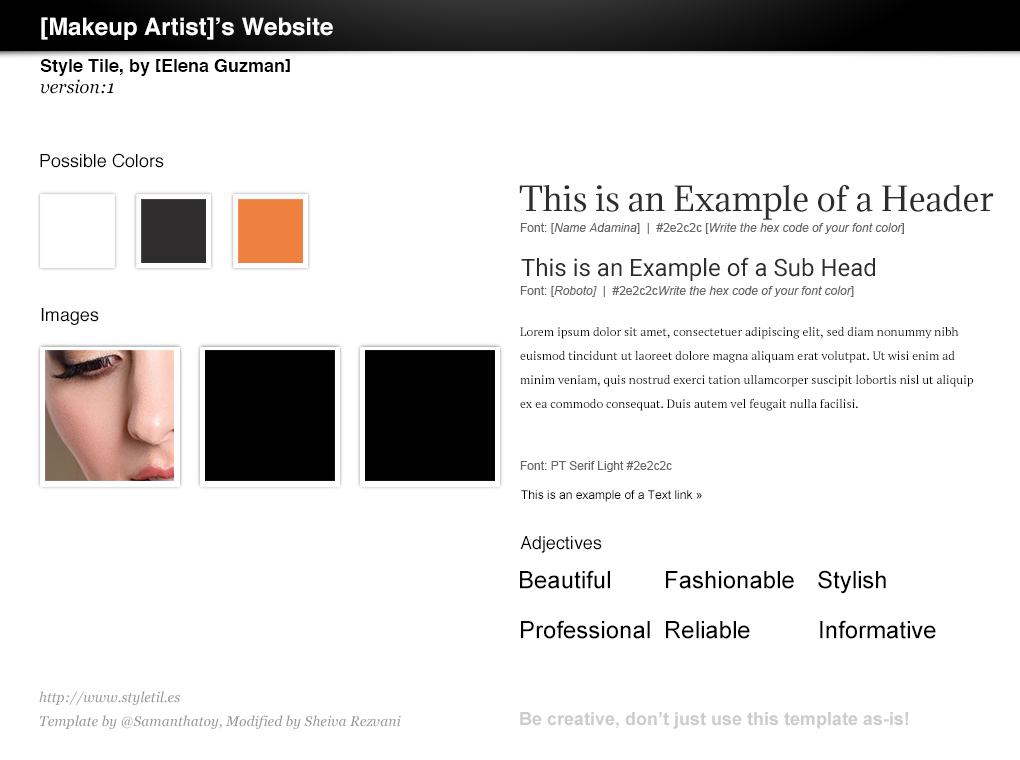
<style>
.page{position:relative;width:1020px;height:760px;background:#ffffff}
.page>*{position:absolute;margin:0}
.t1{font:24px "Helvetica-Bold";color:#ffffff}
.t2{font:18px "Helvetica-Bold";color:#000000}
.t3{font:18px "Georgia-Italic";color:#000000}
.t4{font:18px "Helvetica";color:#000000}
.t5{font:32px "Adamina-Regular";color:#2e2c2c}
.t6{font:12px "Arial-ItalicMT";color:#666666}
.t7{font:12px "ArialMT";color:#666666}
.t8{font:24px "Roboto-Regular";color:#2e2c2c}
.t9{font:12px/24px "PTSerif-Regular";color:#000000}
.t10{font:12px "ArialMT";color:#000000}
.t11{font:24px "ArialMT";color:#000000}
.t12{font:14px/24px "Georgia-Italic";color:#999999}
.t13{font:18px "Arial-BoldMT";color:#cccccc}
</style>
<div class="page">
<p class="t1" style="left:41px;top:17px;width:292px;height:23px">[Makeup Artist]’s Website</p>
<p class="t2" style="left:40px;top:59px;width:250px;height:17px">Style Tile, by [Elena Guzman]</p>
<p class="t3" style="left:40px;top:79px;width:74px;height:15px">version:1</p>
<p class="t4" style="left:40px;top:153px;width:124px;height:15px">Possible Colors</p>
<p class="t5" style="left:519px;top:185px;width:475px;height:35px">This is an Example of a Header</p>
<p class="t6" style="left:520px;top:223px;width:384px;height:11px"><span class="t7">Font: [</span>Name Adamina<span class="t7">]  |  #2e2c2c [</span>Write the hex code of your font color<span class="t7">]</span></p>
<p class="t8" style="left:521px;top:257px;width:354px;height:24px">This is an Example of a Sub Head</p>
<p class="t6" style="left:520px;top:286px;width:334px;height:11px"><span class="t7">Font: [</span>Roboto]<span class="t7">  |  #2e2c2c</span>Write the hex code of your font color<span class="t7">]</span></p>
<p class="t4" style="left:41px;top:308px;width:58px;height:17px">Images</p>
<p class="t9" style="left:520px;top:327px;width:453px;height:84px">Lorem ipsum dolor sit amet, consectetuer adipiscing elit, sed diam nonummy nibh euismod tincidunt ut laoreet dolore magna aliquam erat volutpat. Ut wisi enim ad minim veniam, quis nostrud exerci tation ullamcorper suscipit lobortis nisl ut aliquip ex ea commodo consequat. Duis autem vel feugait nulla facilisi.</p>
<p class="t7" style="left:520px;top:461px;width:152px;height:11px">Font: PT Serif Light #2e2c2c</p>
<p class="t10" style="left:521px;top:490px;width:181px;height:12px">This is an example of a Text link »</p>
<p class="t4" style="left:520px;top:536px;width:82px;height:17px">Adjectives</p>
<p class="t11" style="left:520px;top:570px;width:90px;height:19px">Beautiful</p>
<p class="t11" style="left:666px;top:571px;width:128px;height:18px">Fashionable</p>
<p class="t11" style="left:818px;top:570px;width:68px;height:24px">Stylish</p>
<p class="t11" style="left:521px;top:620px;width:129px;height:19px">Professional</p>
<p class="t11" style="left:666px;top:621px;width:84px;height:18px">Reliable</p>
<p class="t11" style="left:820px;top:620px;width:116px;height:19px">Informative</p>
<p class="t12" style="left:39px;top:691px;width:362px;height:38px">http://www.styletil.es<br>Template by @Samanthatoy, Modified by Sheiva Rezvani</p>
<p class="t13" style="left:520px;top:712px;width:388px;height:17px">Be creative, don’t just use this template as-is!</p>
</div>
